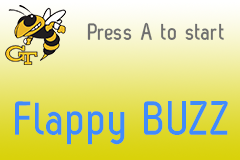
<style>
.page{position:relative;width:240px;height:160px}
.page>*{position:absolute;margin:0}
.t1{font:24px "ZagBold";letter-spacing:0.022em;color:#6f6f6f}
.t2{font:48px "ZagBold";letter-spacing:0.022em;color:#408bfb}
</style>
<div class="page">
<p class="t1" style="left:87px;top:22px;width:137px;height:18px">Press A to start</p>
<p class="t2" style="left:15px;top:101px;width:213px;height:44px">Flappy BUZZ</p>
</div>
